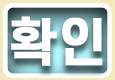
<style>
.page{position:relative;width:115px;height:80px;background:#ffffff}
.page>*{position:absolute;margin:0}
.t1{font:50.5px "S-CoreDream-6Bold";color:#ffffff;font-weight:bold}
</style>
<div class="page">
<p class="t1" style="left:11px;top:16px;width:92px;height:50px">확인</p>
</div>
